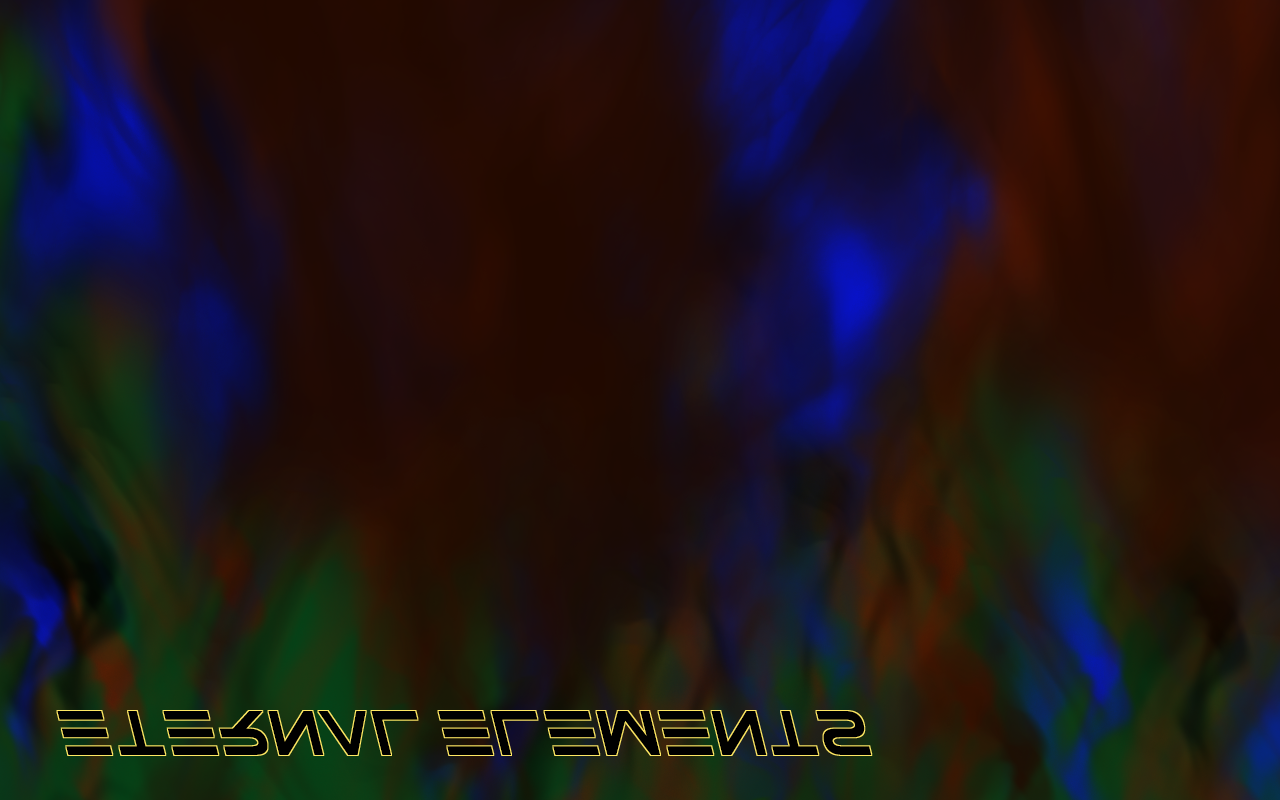
<style>
.page{position:relative;width:1280px;height:800px}
.page>*{position:absolute;margin:0}
.t1{font:60px "ElementalEnd-Italic";color:#000000}
</style>
<div class="page">
<p class="t1" style="left:57px;top:711px;width:815px;height:44px">ETERNAL ELEMENTS</p>
</div>
